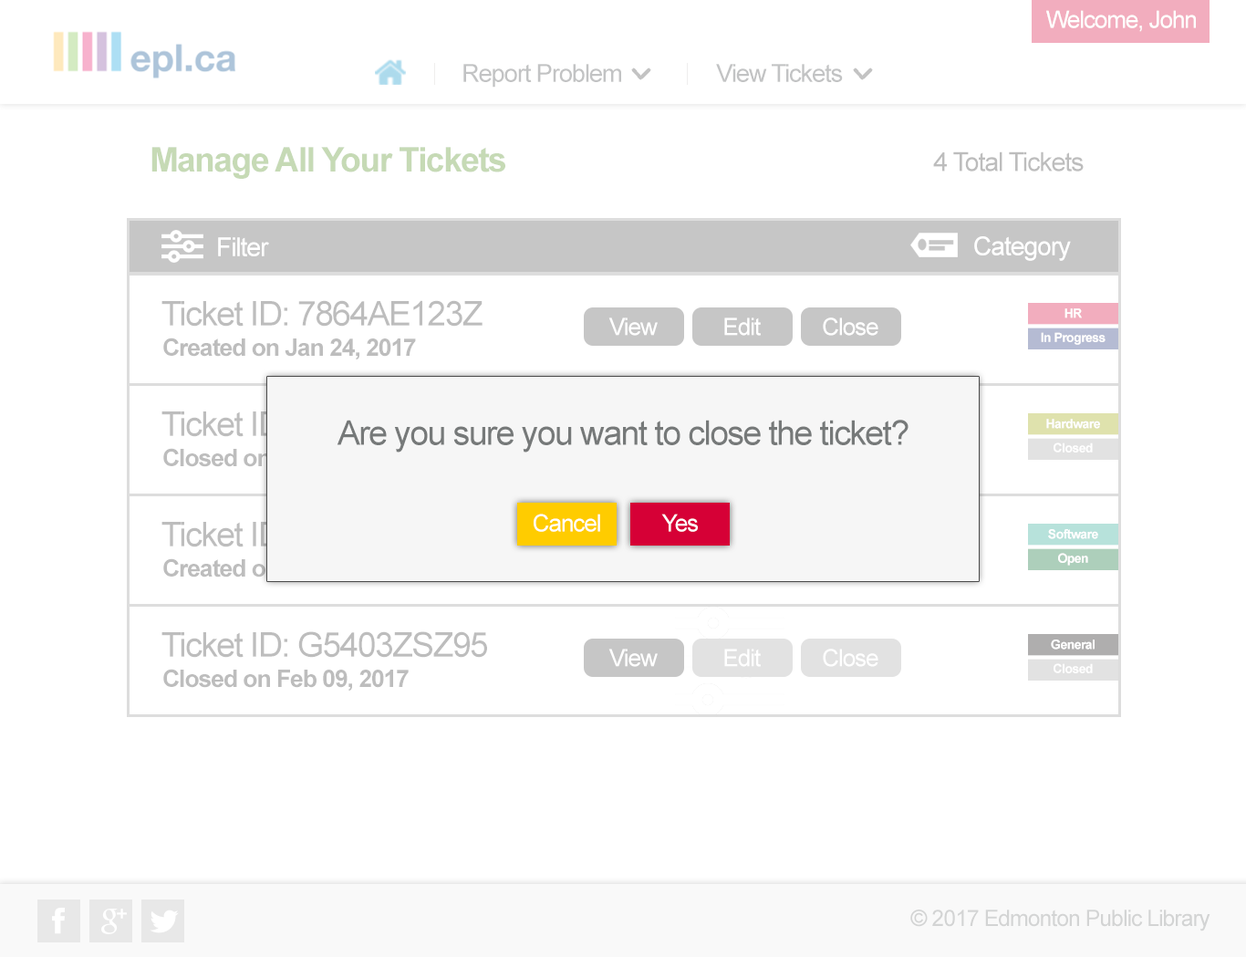
<style>
.page{position:relative;width:1246px;height:957px;background:#ffffff}
.page>*{position:absolute;margin:0}
.t1{font:23.7px "ArialMT";letter-spacing:-0.04em;color:#ffffff}
.t2{font:24.9px "ArialMT";letter-spacing:-0.04em;color:#c2c3c4}
.t3{font:33.9px "Arial-BoldMT";letter-spacing:-0.04em;color:#c6dab5}
.t4{font:26.2px "ArialMT";letter-spacing:-0.04em;color:#bdbdbd}
.t5{font:25.9px "ArialMT";letter-spacing:-0.04em;color:#ffffff}
.t6{font:33.9px "ArialMT";letter-spacing:-0.04em;color:#bdbdbd}
.t7{font:12.8px "Arial-BoldMT";letter-spacing:-0.04em;color:#ffffff}
.t8{font:24.2px "Arial-BoldMT";letter-spacing:-0.04em;color:#bdbdbd}
.t9{font:33.9px "ArialMT";letter-spacing:-0.04em;color:#767979}
.t10{font:24.2px "Arial-BoldMT";letter-spacing:-0.04em}
.t11{font:33.9px "ArialMT";letter-spacing:-0.04em}
.t12{font:22.6px "ArialMT";letter-spacing:-0.04em;color:#d3d4d4}
</style>
<div class="page">
<p class="t1" style="left:1046px;top:10px;width:150px;height:22px">Welcome, John</p>
<p class="t2" style="left:463px;top:64px;width:158px;height:24px">Report Problem</p>
<p class="t2" style="left:716px;top:64px;width:127px;height:18px">View Tickets</p>
<p class="t3" style="left:151px;top:147px;width:354px;height:32px">Manage All Your Tickets</p>
<p class="t4" style="left:933px;top:151px;width:151px;height:20px">4 Total Tickets</p>
<p class="t5" style="left:218px;top:237px;width:51px;height:19px">Filter</p>
<p class="t5" style="left:974px;top:236px;width:97px;height:25px">Category</p>
<p class="t6" style="left:161px;top:300px;width:322px;height:27px">Ticket ID: 7864AE123Z</p>
<p class="t1" style="left:608px;top:317px;width:50px;height:19px">View</p>
<p class="t1" style="left:724px;top:317px;width:37px;height:19px">Edit</p>
<p class="t1" style="left:823px;top:317px;width:55px;height:19px">Close</p>
<p class="t7" style="left:1065px;top:308px;width:17px;height:10px">HR</p>
<p class="t8" style="left:163px;top:338px;width:253px;height:22px">Created on Jan 24, 2017</p>
<p class="t7" style="left:1041px;top:332px;width:65px;height:13px">In Progress</p>
<p class="t9" style="left:337px;top:420px;width:572px;height:32px">Are you sure you want to close the ticket?</p>
<p class="t7" style="left:1046px;top:419px;width:54px;height:10px">Hardware</p>
<p class="t10" style="left:163px;top:448px;width:245px;height:23px">Closed on Jan 29, 2017</p>
<p class="t7" style="left:1054px;top:442px;width:39px;height:10px">Closed</p>
<p class="t11" style="left:161px;top:521px;width:329px;height:26px">Ticket ID: A461AEO854</p>
<p class="t1" style="left:534px;top:514px;width:66px;height:18px">Cancel</p>
<p class="t1" style="left:661px;top:514px;width:37px;height:18px">Yes</p>
<p class="t7" style="left:1048px;top:529px;width:50px;height:10px">Software</p>
<p class="t7" style="left:1058px;top:553px;width:30px;height:13px">Open</p>
<p class="t10" style="left:163px;top:558px;width:254px;height:23px">Created on Feb 03, 2017</p>
<p class="t6" style="left:161px;top:631px;width:326px;height:27px">Ticket ID: G5403ZSZ95</p>
<p class="t7" style="left:1051px;top:639px;width:44px;height:11px">General</p>
<p class="t1" style="left:608px;top:649px;width:50px;height:18px">View</p>
<p class="t1" style="left:724px;top:649px;width:37px;height:18px">Edit</p>
<p class="t1" style="left:823px;top:649px;width:55px;height:18px">Close</p>
<p class="t7" style="left:1054px;top:663px;width:39px;height:10px">Closed</p>
<p class="t8" style="left:163px;top:669px;width:246px;height:22px">Closed on Feb 09, 2017</p>
<p class="t12" style="left:910px;top:909px;width:301px;height:22px">© 2017 Edmonton Public Library</p>
</div>
